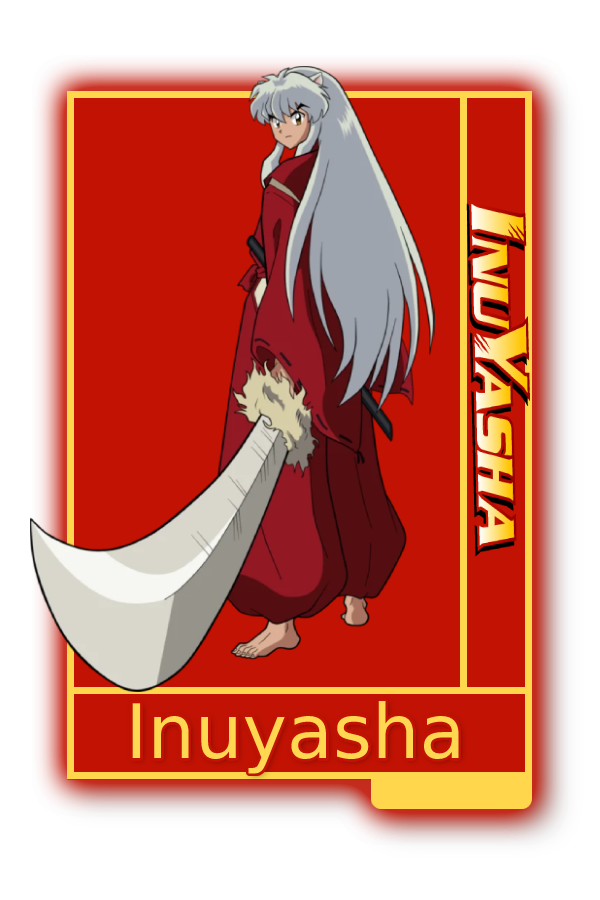
<style>
.page{position:relative;width:600px;height:900px;background:#c11203}
.page>*{position:absolute;margin:0}
.t1{font:75px "CoolveticaRg-Regular";color:#ffd751}
</style>
<div class="page">
<p class="t1" style="left:132px;top:701px;width:327px;height:73px">Inuyasha</p>
</div>
